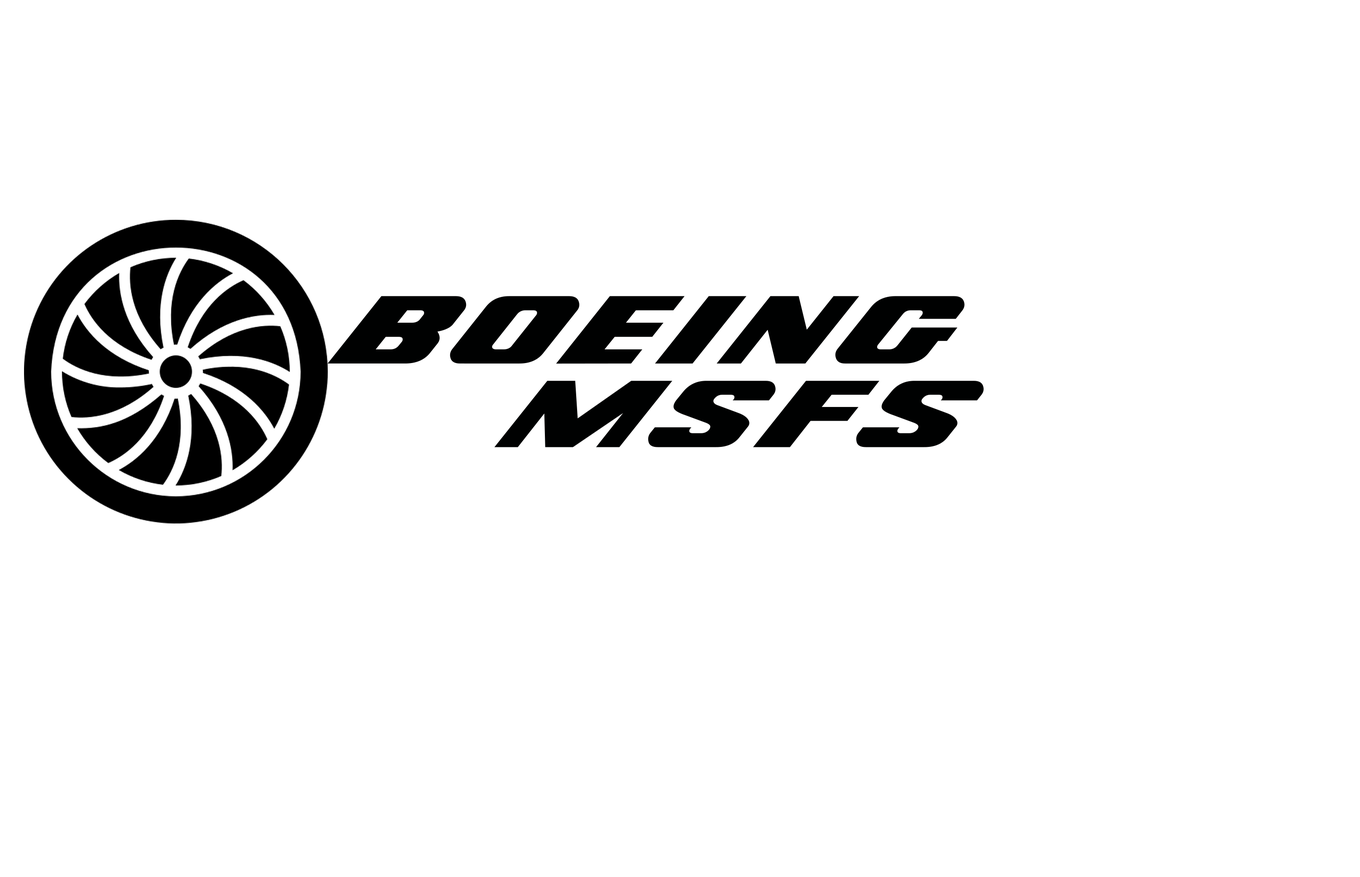
<style>
.page{position:relative;width:1360px;height:877px;background:#ffffff}
.page>*{position:absolute;margin:0}
.t1{font:94.5px "BOEING-style";color:#000101}
.t2{font:93px "BOEING-style";color:#000101}
</style>
<div class="page">
<p class="t1" style="left:327px;top:296px;width:637px;height:68px">BOEING</p>
<p class="t2" style="left:494px;top:381px;width:490px;height:66px">MSFS</p>
</div>
